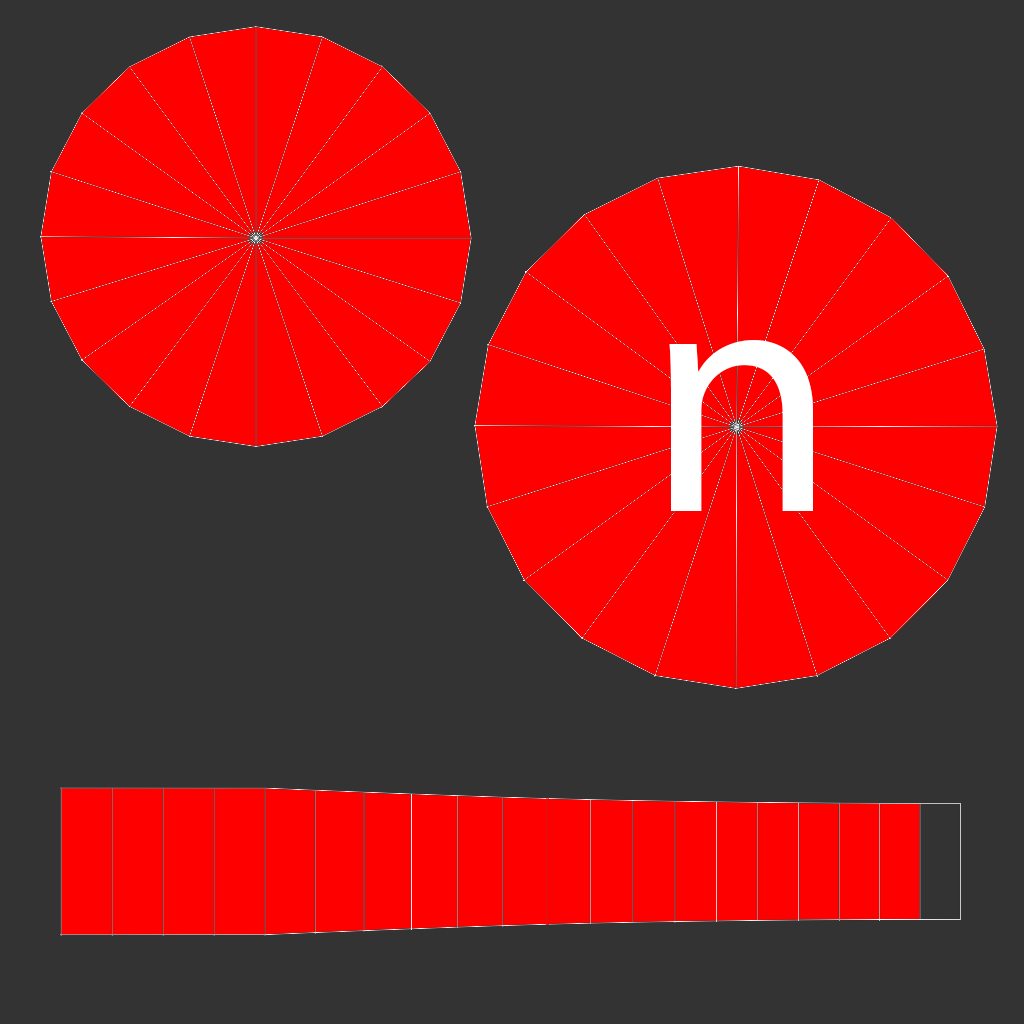
<style>
.page{position:relative;width:1024px;height:1024px;background:#333333}
.page>*{position:absolute;margin:0}
.t1{font:344.1px "MyriadPro-Regular";color:#ffffff}
</style>
<div class="page">
<p class="t1" style="left:669px;top:340px;width:144px;height:171px">n</p>
</div>
